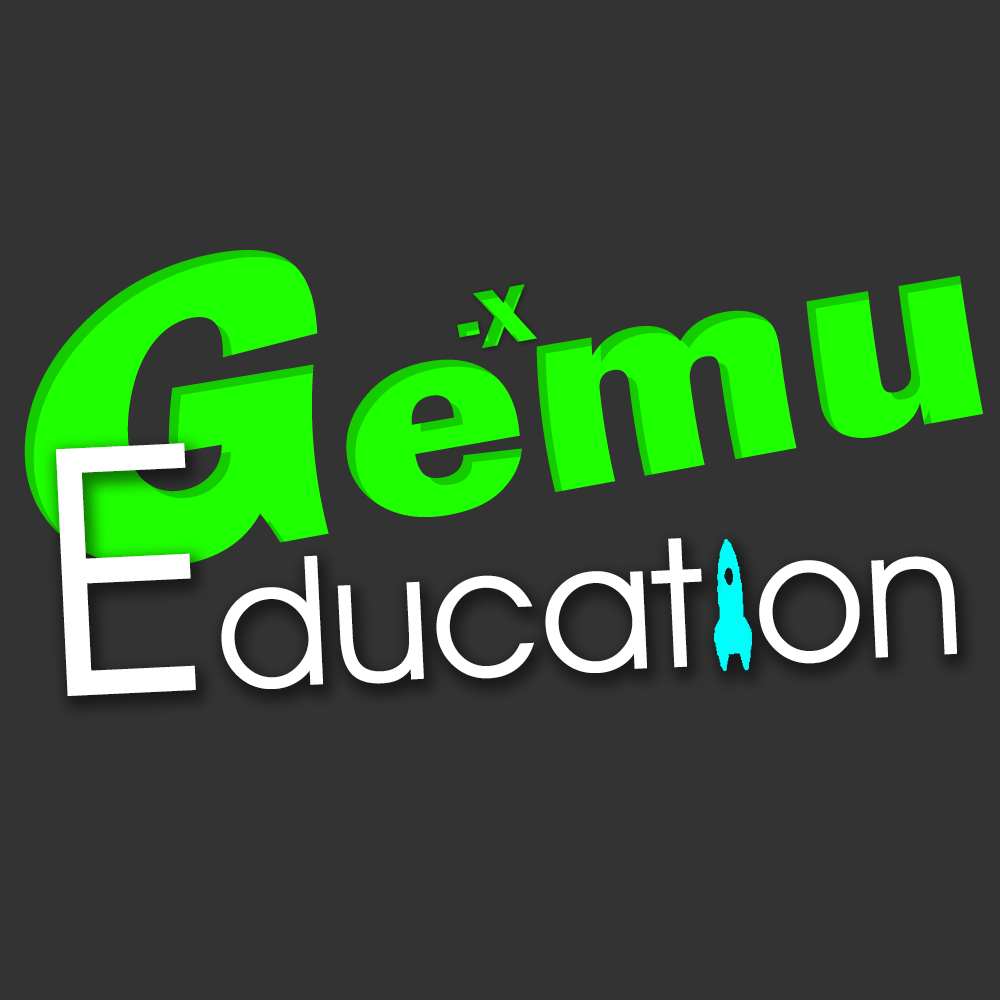
<style>
.page{position:relative;width:1000px;height:1000px;background:#333333}
.page>*{position:absolute;margin:0}
.t1{font:277.8px "FranklinGothic-Heavy";color:#1eff00}
.t2{font:416.7px "FranklinGothic-Heavy";color:#1eff00}
.t3{font:83.3px "FranklinGothic-Heavy"}
.t4{font:180.6px "Decker-Regular";color:#ffffff}
.t5{font:347.2px "Decker-Regular";color:#ffffff}
</style>
<div class="page">
<p class="t1" style="left:24px;top:250px;width:959px;height:318px;rotate:-10deg"><span class="t2">G</span>emu</p>
<p class="t3" style="left:457px;top:284px;width:80px;height:65px;rotate:-10deg">-X</p>
<p class="t4" style="left:56px;top:443px;width:901px;height:253px;rotate:-3deg"><span class="t5">E</span>ducat on</p>
</div>
